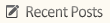
<style>
.page{position:relative;width:110px;height:23px;background:#fdfaf2}
.page>*{position:absolute;margin:0}
.t1{font:17.3px "Calibri";letter-spacing:-0.04em;scale:0.94 1}
</style>
<div class="page">
<p class="t1" style="left:26px;top:6px;width:77px;height:12px">Recent Posts</p>
</div>
